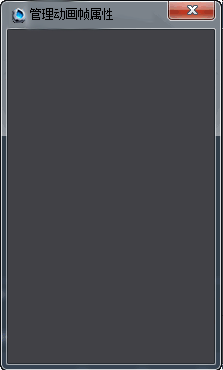
<style>
.page{position:relative;width:223px;height:370px;background:#414146}
.page>*{position:absolute;margin:0}
.t1{font:12px "NSimSun";color:#000000}
</style>
<div class="page">
<p class="t1" style="left:30px;top:8px;width:83px;height:12px">管理动画帧属性</p>
</div>
